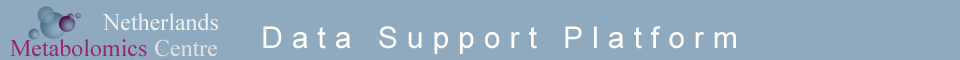
<style>
.page{position:relative;width:960px;height:60px;background:#8faabe}
.page>*{position:absolute;margin:0}
.t1{font:24px "TimesNewRomanPSMT";color:#ebf0f3}
.t2{font:30px "ArialMT";letter-spacing:0.3em;color:#ffffff}
.t3{font:24px "TimesNewRomanPSMT";color:#932971}
.t4{font:24px "TimesNewRomanPSMT";color:#dde2e5}
</style>
<div class="page">
<p class="t1" style="left:102px;top:13px;width:116px;height:18px">Netherlands</p>
<p class="t2" style="left:263px;top:26px;width:473px;height:28px">Data Support Platform</p>
<p class="t3" style="left:10px;top:39px;width:137px;height:18px">Metabolomics</p>
<p class="t4" style="left:155px;top:39px;width:62px;height:18px">Centre</p>
</div>
